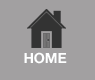
<style>
.page{position:relative;width:95px;height:80px;background:#a2a0a1}
.page>*{position:absolute;margin:0}
.t1{font:14px "HelveticaNeue-Bold";color:#feffff}
</style>
<div class="page">
<p class="t1" style="left:24px;top:52px;width:43px;height:12px">HOME</p>
</div>
